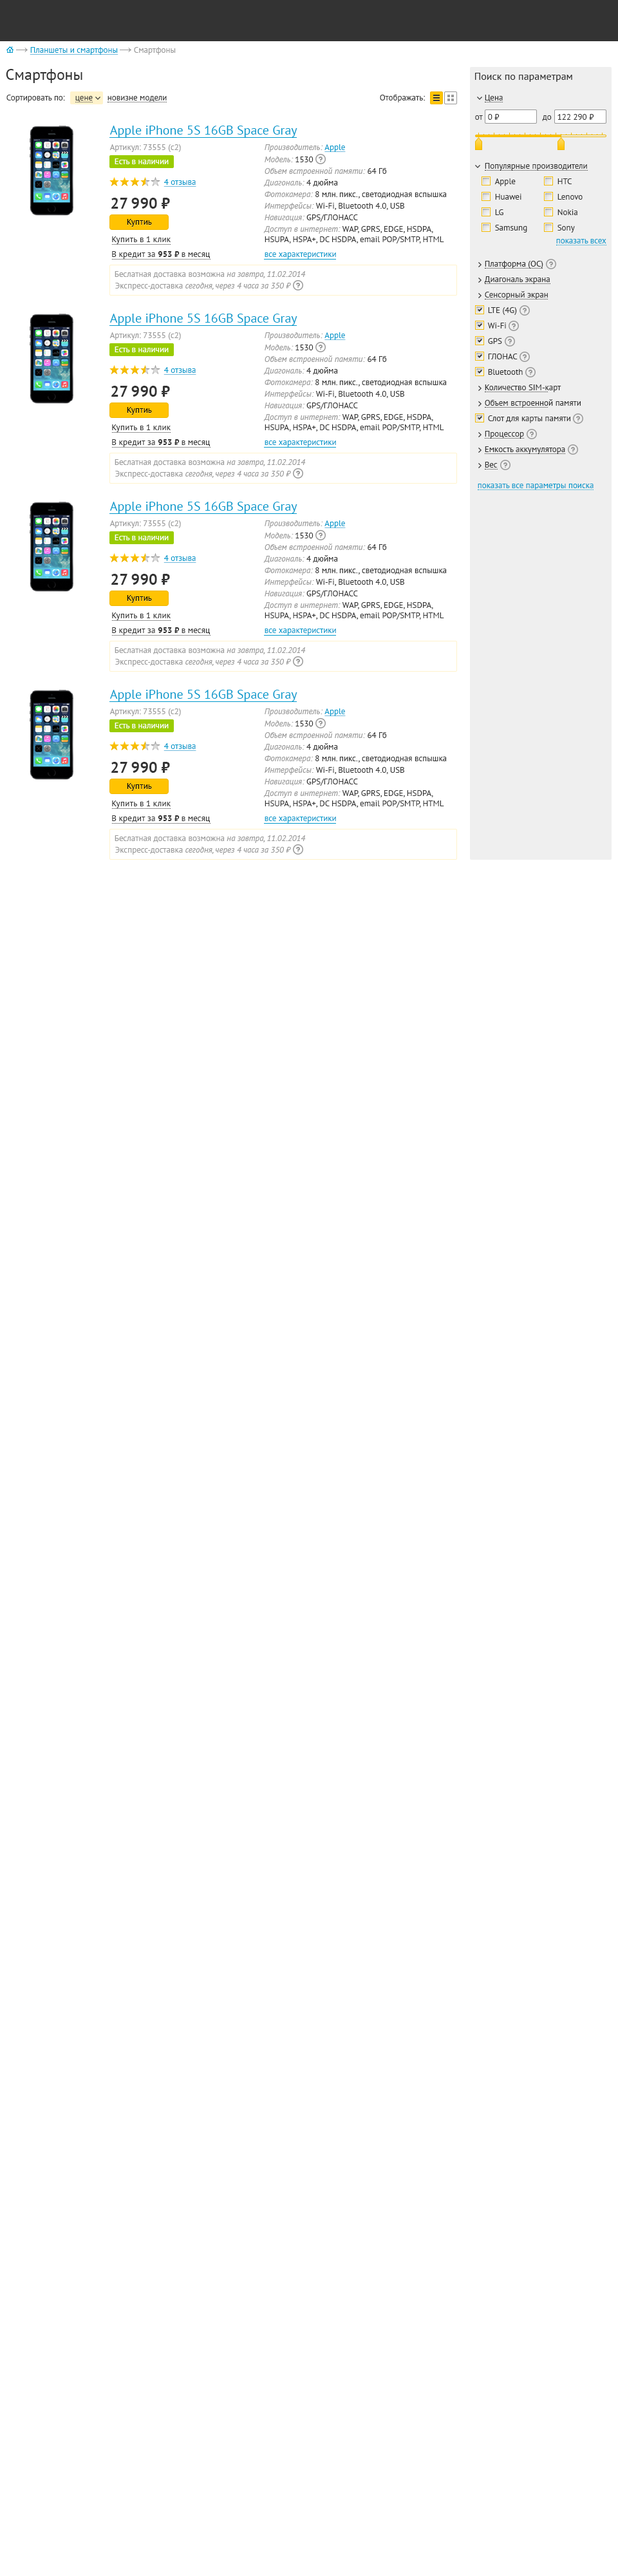
<style>
.page{position:relative;width:618px;height:2576px;background:#ffffff}
.page>*{position:absolute;margin:0}
.t1{font:8.4px "PTSans-Regular";color:#0099cc;text-decoration:underline}
.t2{font:8.4px "PTSans-Regular";color:#999999}
.t3{font:15.5px "PTSans-Regular";color:#333333}
.t4{font:10.3px "PTSans-Regular";color:#333333}
.t5{font:8.4px "PTSans-Regular";color:#333333}
.t6{font:12.9px "PTSans-Regular";color:#0099cc}
.t7{font:8.4px "PTSans-Italic";color:#999999}
.t8{font:8.4px "PTSans-Regular";color:#ffffff}
.t9{font:15.5px "PTSans-Bold";color:#333333}
.t10{font:8.4px "PTSans-Regular";color:#000000}
.t11{font:8.4px/10.3px "PTSans-Regular";color:#333333}
.t12{font:8.4px/10.3px "PTSans-Italic";color:#999999}
.t13{font:8.4px "PTSans-Regular";color:#0099cc}
.t14{font:8.4px "PTSans-Bold";color:#333333}
</style>
<div class="page">
<p class="t1" style="left:30px;top:47px;width:88px;height:8px">Планшеты и смартфоны</p>
<p class="t2" style="left:134px;top:47px;width:42px;height:8px">Смартфоны</p>
<p class="t3" style="left:6px;top:69px;width:76px;height:14px">Смартфоны</p>
<p class="t4" style="left:475px;top:73px;width:98px;height:9px">Поиск по параметрам</p>
<p class="t5" style="left:6px;top:95px;width:59px;height:7px">Сортировать по:</p>
<p class="t5" style="left:75px;top:96px;width:18px;height:6px">цене</p>
<p class="t5" style="left:108px;top:96px;width:59px;height:6px">новизне модели</p>
<p class="t5" style="left:380px;top:95px;width:46px;height:7px">Отображать:</p>
<p class="t5" style="left:485px;top:95px;width:18px;height:7px">Цена</p>
<p class="t5" style="left:488px;top:114px;width:12px;height:6px">0 ⃏</p>
<p class="t5" style="left:558px;top:114px;width:36px;height:6px">122 290 ⃏</p>
<p class="t6" style="left:109px;top:126px;width:189px;height:11px">Apple iPhone 5S 16GB Space Gray</p>
<p class="t5" style="left:475px;top:115px;width:8px;height:5px">от</p>
<p class="t5" style="left:542px;top:115px;width:10px;height:6px">до</p>
<p class="t2" style="left:109px;top:144px;width:72px;height:8px">Артикул: 73555 (с2)</p>
<p class="t7" style="left:265px;top:144px;width:81px;height:8px">Производитель: <span class="t1">Apple</span></p>
<p class="t8" style="left:115px;top:158px;width:54px;height:6px">Есть в наличии</p>
<p class="t7" style="left:265px;top:156px;width:49px;height:6px">Модель: <span class="t5">1530</span></p>
<p class="t7" style="left:265px;top:167px;width:122px;height:9px">Объем встроенной памяти: <span class="t5">64 Гб</span></p>
<p class="t5" style="left:485px;top:163px;width:102px;height:8px">Популярные производители</p>
<p class="t1" style="left:164px;top:179px;width:32px;height:8px">4 отзыва</p>
<p class="t7" style="left:263px;top:179px;width:75px;height:8px">Диагональ: <span class="t5">4 дюйма</span></p>
<p class="t5" style="left:495px;top:178px;width:21px;height:8px">Apple</p>
<p class="t5" style="left:558px;top:178px;width:14px;height:6px">HTC</p>
<p class="t9" style="left:111px;top:198px;width:59px;height:11px">27 990 ⃏</p>
<p class="t5" style="left:265px;top:191px;width:182px;height:8px"><span class="t7">Фотокамера: </span>8 млн. пикс., светодиодная вспышка</p>
<p class="t5" style="left:495px;top:194px;width:27px;height:6px">Huawei</p>
<p class="t5" style="left:558px;top:194px;width:25px;height:6px">Lenovo</p>
<p class="t5" style="left:265px;top:202px;width:139px;height:9px"><span class="t7">Интерфейсы: </span>Wi-Fi, Bluetooth 4.0, USB</p>
<p class="t5" style="left:495px;top:209px;width:9px;height:6px">LG</p>
<p class="t5" style="left:558px;top:209px;width:20px;height:6px">Nokia</p>
<p class="t10" style="left:127px;top:219px;width:25px;height:8px">Куптиь</p>
<p class="t5" style="left:265px;top:214px;width:93px;height:8px"><span class="t7">Навигация: </span>GPS/ГЛОНАСС</p>
<p class="t11" style="left:263px;top:226px;width:181px;height:17px"><span class="t12">Доступ в интернет: </span>WAP, GPRS, EDGE, HSDPA,<br>HSUPA, HSPA+, DC HSDPA, email POP/SMTP, HTML</p>
<p class="t5" style="left:495px;top:225px;width:32px;height:7px">Samsung</p>
<p class="t5" style="left:558px;top:225px;width:17px;height:7px">Sony</p>
<p class="t5" style="left:112px;top:236px;width:59px;height:8px">Купить в 1 клик</p>
<p class="t13" style="left:556px;top:239px;width:51px;height:4px">показать всех</p>
<p class="t5" style="left:112px;top:251px;width:98px;height:8px">В кредит за <span class="t14">953 ⃏ </span>в месяц</p>
<p class="t13" style="left:265px;top:252px;width:71px;height:7px">все характеристики</p>
<p class="t5" style="left:485px;top:261px;width:59px;height:8px">Платформа (ОС)</p>
<p class="t2" style="left:115px;top:271px;width:191px;height:8px">Беслатная доставка возможна <span class="t7">на завтра, 11.02.2014</span></p>
<p class="t5" style="left:484px;top:276px;width:66px;height:8px">Диагональ экрана</p>
<p class="t7" style="left:115px;top:283px;width:176px;height:7px"><span class="t2">Экспресс-доставка </span>сегодня, через 4 часа за 350 ⃏</p>
<p class="t5" style="left:485px;top:291px;width:63px;height:8px">Сенсорный экран</p>
<p class="t6" style="left:109px;top:314px;width:189px;height:11px">Apple iPhone 5S 16GB Space Gray</p>
<p class="t5" style="left:488px;top:307px;width:29px;height:8px">LTE (4G)</p>
<p class="t5" style="left:488px;top:323px;width:18px;height:5px">Wi-Fi</p>
<p class="t2" style="left:109px;top:332px;width:72px;height:8px">Артикул: 73555 (с2)</p>
<p class="t7" style="left:265px;top:332px;width:81px;height:8px">Производитель: <span class="t1">Apple</span></p>
<p class="t5" style="left:488px;top:338px;width:14px;height:6px">GPS</p>
<p class="t8" style="left:115px;top:346px;width:54px;height:6px">Есть в наличии</p>
<p class="t7" style="left:265px;top:345px;width:49px;height:5px">Модель: <span class="t5">1530</span></p>
<p class="t5" style="left:488px;top:354px;width:30px;height:5px">ГЛОНАС</p>
<p class="t7" style="left:265px;top:355px;width:122px;height:9px">Объем встроенной памяти: <span class="t5">64 Гб</span></p>
<p class="t1" style="left:164px;top:367px;width:32px;height:8px">4 отзыва</p>
<p class="t7" style="left:263px;top:367px;width:75px;height:8px">Диагональ: <span class="t5">4 дюйма</span></p>
<p class="t5" style="left:488px;top:369px;width:35px;height:6px">Bluetooth</p>
<p class="t9" style="left:111px;top:386px;width:59px;height:11px">27 990 ⃏</p>
<p class="t5" style="left:265px;top:379px;width:182px;height:8px"><span class="t7">Фотокамера: </span>8 млн. пикс., светодиодная вспышка</p>
<p class="t5" style="left:485px;top:384px;width:77px;height:8px">Количество SIM-карт</p>
<p class="t5" style="left:265px;top:390px;width:139px;height:9px"><span class="t7">Интерфейсы: </span>Wi-Fi, Bluetooth 4.0, USB</p>
<p class="t5" style="left:485px;top:399px;width:96px;height:9px">Объем встроенной памяти</p>
<p class="t10" style="left:127px;top:407px;width:25px;height:8px">Куптиь</p>
<p class="t5" style="left:265px;top:402px;width:93px;height:8px"><span class="t7">Навигация: </span>GPS/ГЛОНАСС</p>
<p class="t5" style="left:112px;top:424px;width:59px;height:8px">Купить в 1 клик</p>
<p class="t11" style="left:263px;top:414px;width:181px;height:17px"><span class="t12">Доступ в интернет: </span>WAP, GPRS, EDGE, HSDPA,<br>HSUPA, HSPA+, DC HSDPA, email POP/SMTP, HTML</p>
<p class="t5" style="left:488px;top:415px;width:83px;height:8px">Слот для карты памяти</p>
<p class="t5" style="left:485px;top:431px;width:39px;height:8px">Процессор</p>
<p class="t5" style="left:112px;top:439px;width:98px;height:8px">В кредит за <span class="t14">953 ⃏ </span>в месяц</p>
<p class="t13" style="left:265px;top:440px;width:71px;height:7px">все характеристики</p>
<p class="t5" style="left:485px;top:446px;width:80px;height:8px">Емкость аккумулятора</p>
<p class="t2" style="left:115px;top:459px;width:191px;height:8px">Беслатная доставка возможна <span class="t7">на завтра, 11.02.2014</span></p>
<p class="t5" style="left:485px;top:462px;width:13px;height:6px">Вес</p>
<p class="t7" style="left:115px;top:471px;width:176px;height:7px"><span class="t2">Экспресс-доставка </span>сегодня, через 4 часа за 350 ⃏</p>
<p class="t13" style="left:478px;top:484px;width:116px;height:6px">показать все параметры поиска</p>
<p class="t6" style="left:109px;top:502px;width:189px;height:11px">Apple iPhone 5S 16GB Space Gray</p>
<p class="t2" style="left:109px;top:520px;width:72px;height:8px">Артикул: 73555 (с2)</p>
<p class="t7" style="left:265px;top:520px;width:81px;height:8px">Производитель: <span class="t1">Apple</span></p>
<p class="t7" style="left:265px;top:533px;width:49px;height:5px">Модель: <span class="t5">1530</span></p>
<p class="t8" style="left:115px;top:535px;width:54px;height:5px">Есть в наличии</p>
<p class="t7" style="left:265px;top:544px;width:122px;height:8px">Объем встроенной памяти: <span class="t5">64 Гб</span></p>
<p class="t1" style="left:164px;top:555px;width:32px;height:8px">4 отзыва</p>
<p class="t7" style="left:263px;top:555px;width:75px;height:8px">Диагональ: <span class="t5">4 дюйма</span></p>
<p class="t5" style="left:265px;top:567px;width:182px;height:8px"><span class="t7">Фотокамера: </span>8 млн. пикс., светодиодная вспышка</p>
<p class="t9" style="left:111px;top:574px;width:59px;height:11px">27 990 ⃏</p>
<p class="t5" style="left:265px;top:578px;width:139px;height:9px"><span class="t7">Интерфейсы: </span>Wi-Fi, Bluetooth 4.0, USB</p>
<p class="t5" style="left:265px;top:591px;width:93px;height:7px"><span class="t7">Навигация: </span>GPS/ГЛОНАСС</p>
<p class="t10" style="left:127px;top:595px;width:25px;height:8px">Куптиь</p>
<p class="t11" style="left:263px;top:602px;width:181px;height:18px"><span class="t12">Доступ в интернет: </span>WAP, GPRS, EDGE, HSDPA,<br>HSUPA, HSPA+, DC HSDPA, email POP/SMTP, HTML</p>
<p class="t5" style="left:112px;top:612px;width:59px;height:8px">Купить в 1 клик</p>
<p class="t5" style="left:112px;top:627px;width:98px;height:8px">В кредит за <span class="t14">953 ⃏ </span>в месяц</p>
<p class="t13" style="left:265px;top:629px;width:71px;height:6px">все характеристики</p>
<p class="t2" style="left:115px;top:647px;width:191px;height:8px">Беслатная доставка возможна <span class="t7">на завтра, 11.02.2014</span></p>
<p class="t7" style="left:115px;top:659px;width:176px;height:8px"><span class="t2">Экспресс-доставка </span>сегодня, через 4 часа за 350 ⃏</p>
<p class="t6" style="left:109px;top:690px;width:189px;height:11px">Apple iPhone 5S 16GB Space Gray</p>
<p class="t2" style="left:109px;top:708px;width:72px;height:8px">Артикул: 73555 (с2)</p>
<p class="t7" style="left:265px;top:708px;width:81px;height:8px">Производитель: <span class="t1">Apple</span></p>
<p class="t8" style="left:115px;top:723px;width:54px;height:5px">Есть в наличии</p>
<p class="t7" style="left:265px;top:721px;width:49px;height:5px">Модель: <span class="t5">1530</span></p>
<p class="t7" style="left:265px;top:732px;width:122px;height:8px">Объем встроенной памяти: <span class="t5">64 Гб</span></p>
<p class="t1" style="left:164px;top:743px;width:32px;height:8px">4 отзыва</p>
<p class="t7" style="left:263px;top:743px;width:75px;height:8px">Диагональ: <span class="t5">4 дюйма</span></p>
<p class="t9" style="left:111px;top:762px;width:59px;height:11px">27 990 ⃏</p>
<p class="t5" style="left:265px;top:755px;width:182px;height:8px"><span class="t7">Фотокамера: </span>8 млн. пикс., светодиодная вспышка</p>
<p class="t5" style="left:265px;top:766px;width:139px;height:9px"><span class="t7">Интерфейсы: </span>Wi-Fi, Bluetooth 4.0, USB</p>
<p class="t10" style="left:127px;top:783px;width:25px;height:8px">Куптиь</p>
<p class="t5" style="left:265px;top:779px;width:93px;height:7px"><span class="t7">Навигация: </span>GPS/ГЛОНАСС</p>
<p class="t11" style="left:263px;top:790px;width:181px;height:18px"><span class="t12">Доступ в интернет: </span>WAP, GPRS, EDGE, HSDPA,<br>HSUPA, HSPA+, DC HSDPA, email POP/SMTP, HTML</p>
<p class="t5" style="left:112px;top:800px;width:59px;height:8px">Купить в 1 клик</p>
<p class="t5" style="left:112px;top:815px;width:98px;height:8px">В кредит за <span class="t14">953 ⃏ </span>в месяц</p>
<p class="t13" style="left:265px;top:817px;width:71px;height:6px">все характеристики</p>
<p class="t2" style="left:115px;top:835px;width:191px;height:8px">Беслатная доставка возможна <span class="t7">на завтра, 11.02.2014</span></p>
<p class="t7" style="left:115px;top:847px;width:176px;height:8px"><span class="t2">Экспресс-доставка </span>сегодня, через 4 часа за 350 ⃏</p>
</div>
